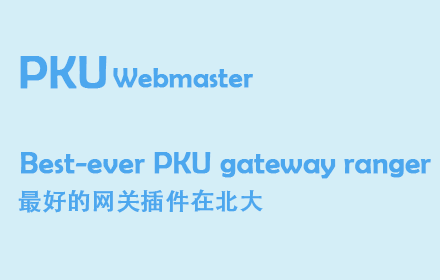
<style>
.page{position:relative;width:440px;height:280px;background:#d4eef7}
.page>*{position:absolute;margin:0}
.t1{font:46px "BerlinSansFB-Reg";color:#4ca7ee;font-weight:bold}
.t2{font:28px "BerlinSansFB-Reg";color:#4ca7ee;font-weight:bold}
.t3{font:30px "BerlinSansFB-Reg";color:#4ca7ee;font-weight:bold}
.t4{font:24px "AdobeHeitiStd-Regular";color:#4ca7ee;font-weight:bold}
</style>
<div class="page">
<p class="t1" style="left:20px;top:56px;width:87px;height:33px">PKU</p>
<p class="t2" style="left:113px;top:68px;width:140px;height:20px">Webmaster</p>
<p class="t3" style="left:21px;top:152px;width:410px;height:27px">Best-ever PKU gateway ranger</p>
<p class="t4" style="left:18px;top:189px;width:245px;height:24px">最好的网关插件在北大</p>
</div>
